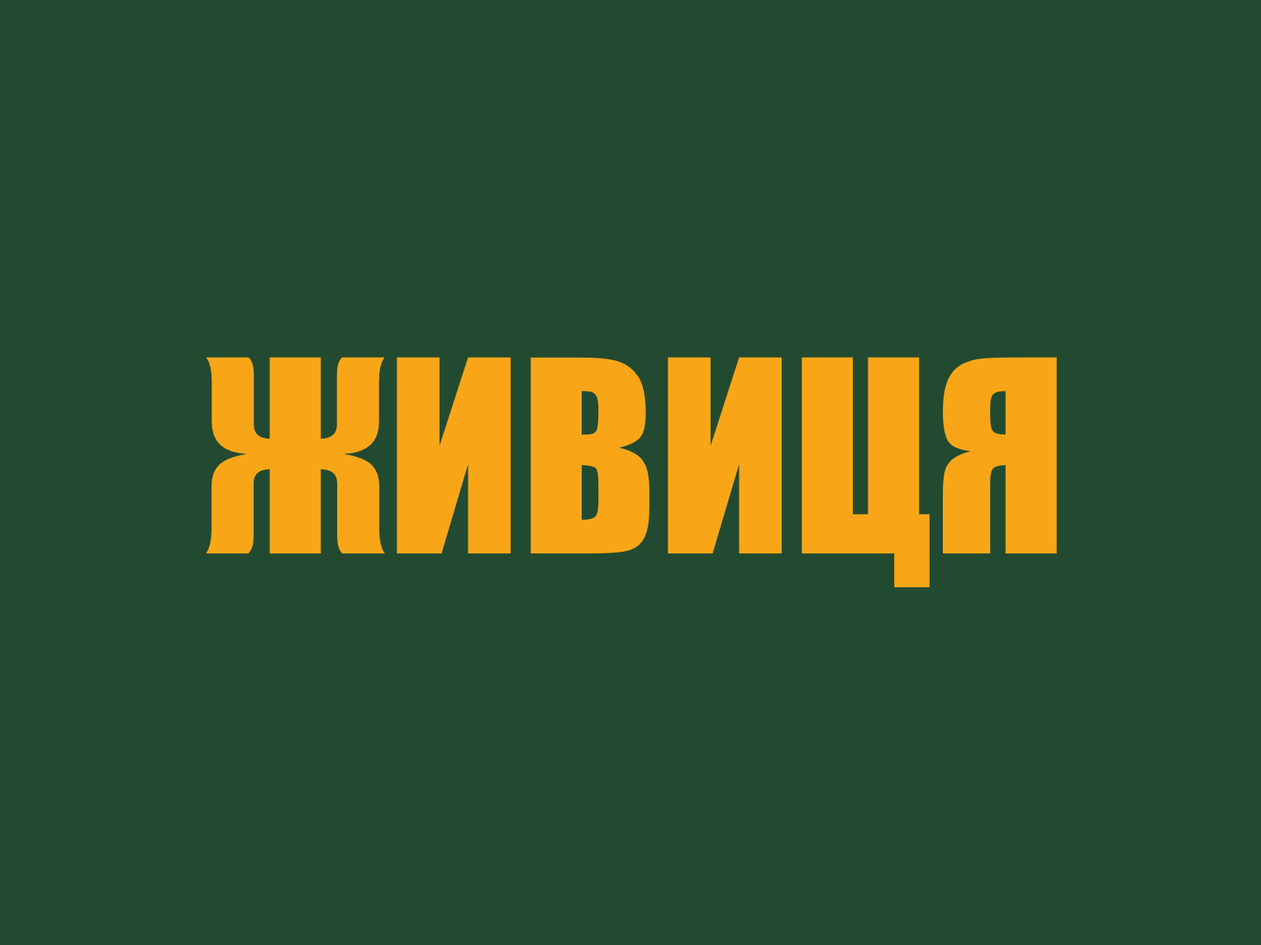
<style>
.page{position:relative;width:1261px;height:945px;background:#224a30}
.page>*{position:absolute;margin:0}
.t1{font:247.9px "Impact";color:#f8a618}
</style>
<div class="page">
<p class="t1" style="left:206px;top:357px;width:851px;height:231px">ЖИВИЦЯ</p>
</div>
